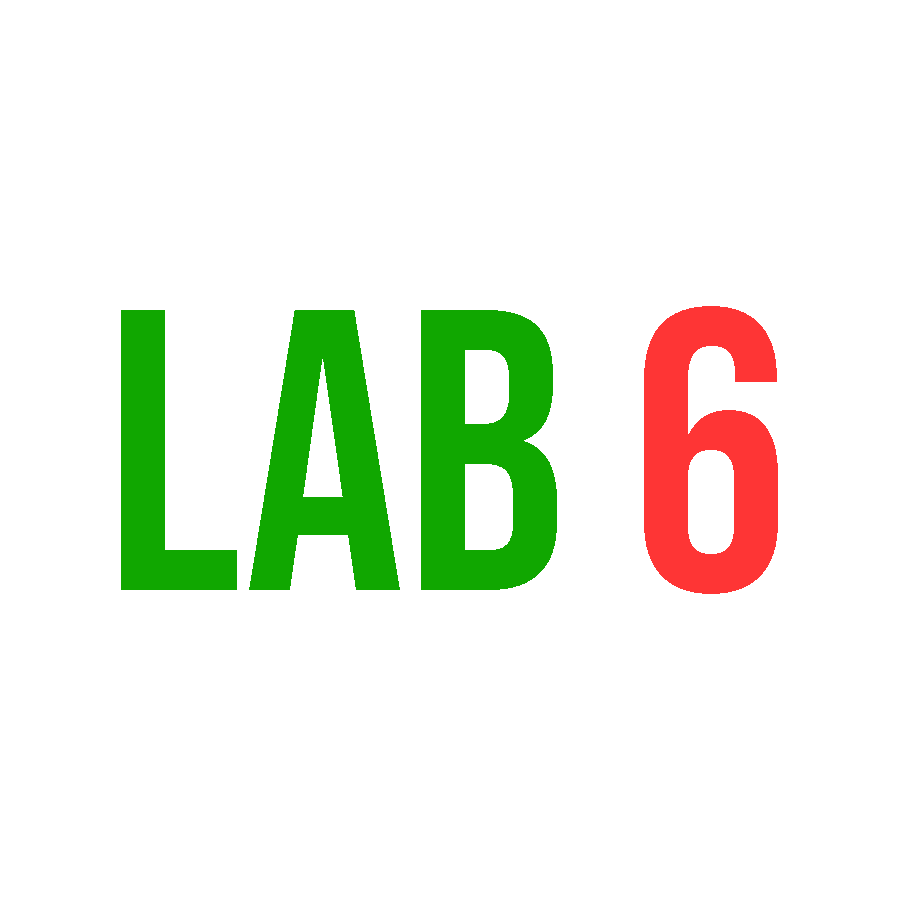
<style>
.page{position:relative;width:900px;height:900px;background:#ffffff}
.page>*{position:absolute;margin:0}
.t1{font:400px "BebasNeue-Regular";color:#10a700}
</style>
<div class="page">
<p class="t1" style="left:121px;top:306px;width:657px;height:288px">Lab 6</p>
<p class="t1" style="left:121px;top:306px;width:657px;height:288px">Lab 6</p>
</div>
